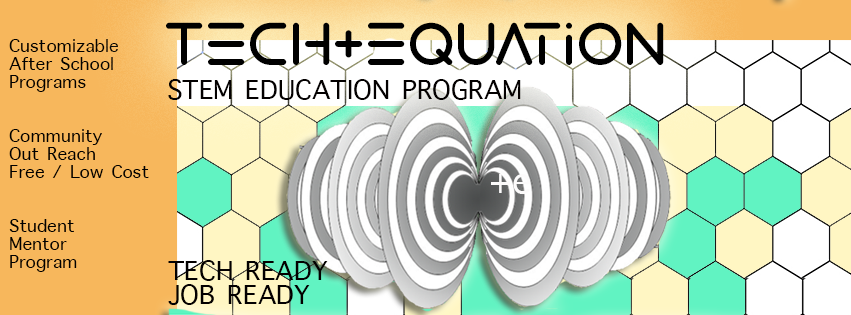
<style>
.page{position:relative;width:851px;height:315px;background:#ffffff}
.page>*{position:absolute;margin:0}
.t1{font:61.8px "ElectroShackle";color:#000000}
.t2{font:24px/18px "AppleSymbols";color:#000000}
.t3{font:36px "AppleSymbols";color:#030000}
.t4{font:48px "AppleSymbols";color:#fcfbfb}
.t5{font:36px/24px "AppleSymbols";color:#030000}
</style>
<div class="page">
<p class="t1" style="left:166px;top:22px;width:498px;height:43px">Tech+equation</p>
<p class="t2" style="left:9px;top:39px;width:140px;height:233px">Customizable<br>After School <br>Programs<br><br><br>Community<br>Out Reach<br>Free / Low Cost<br><br><br>Student <br>Mentor<br>Program</p>
<p class="t3" style="left:168px;top:79px;width:353px;height:21px">STEM EDUCATION PROGRAM</p>
<p class="t4" style="left:491px;top:174px;width:39px;height:20px">+e</p>
<p class="t5" style="left:168px;top:260px;width:160px;height:45px">TECH READY <br>JOB READY</p>
</div>
